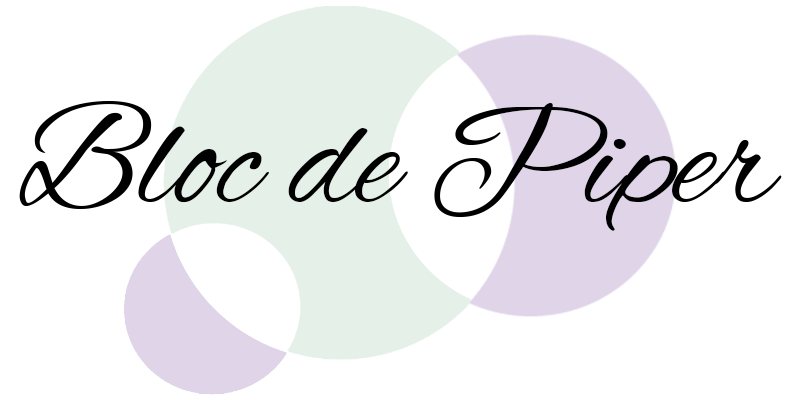
<style>
.page{position:relative;width:800px;height:400px;background:#ffffff}
.page>*{position:absolute;margin:0}
.t1{font:150px "AlexBrush-Regular";color:#000000}
</style>
<div class="page">
<p class="t1" style="left:19px;top:101px;width:763px;height:130px">Bloc de Piper</p>
</div>
